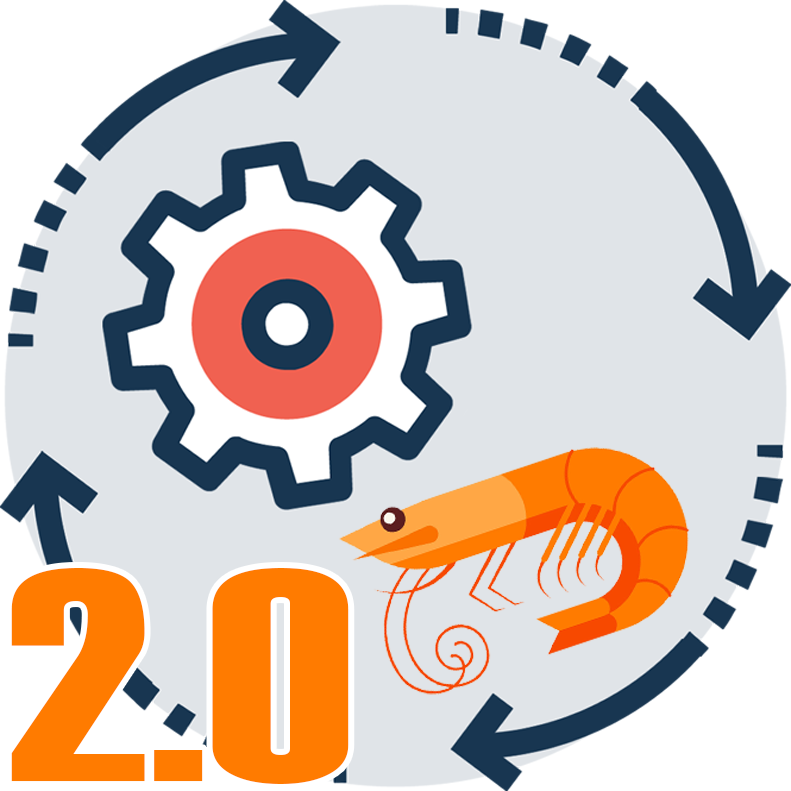
<style>
.page{position:relative;width:791px;height:791px;background:#e0e4e8}
.page>*{position:absolute;margin:0}
.t1{font:302.4px "Haettenschweiler";color:#ff7b00;scale:1.25 1}
</style>
<div class="page">
<p class="t1" style="left:11px;top:568px;width:338px;height:216px">2.0</p>
</div>
